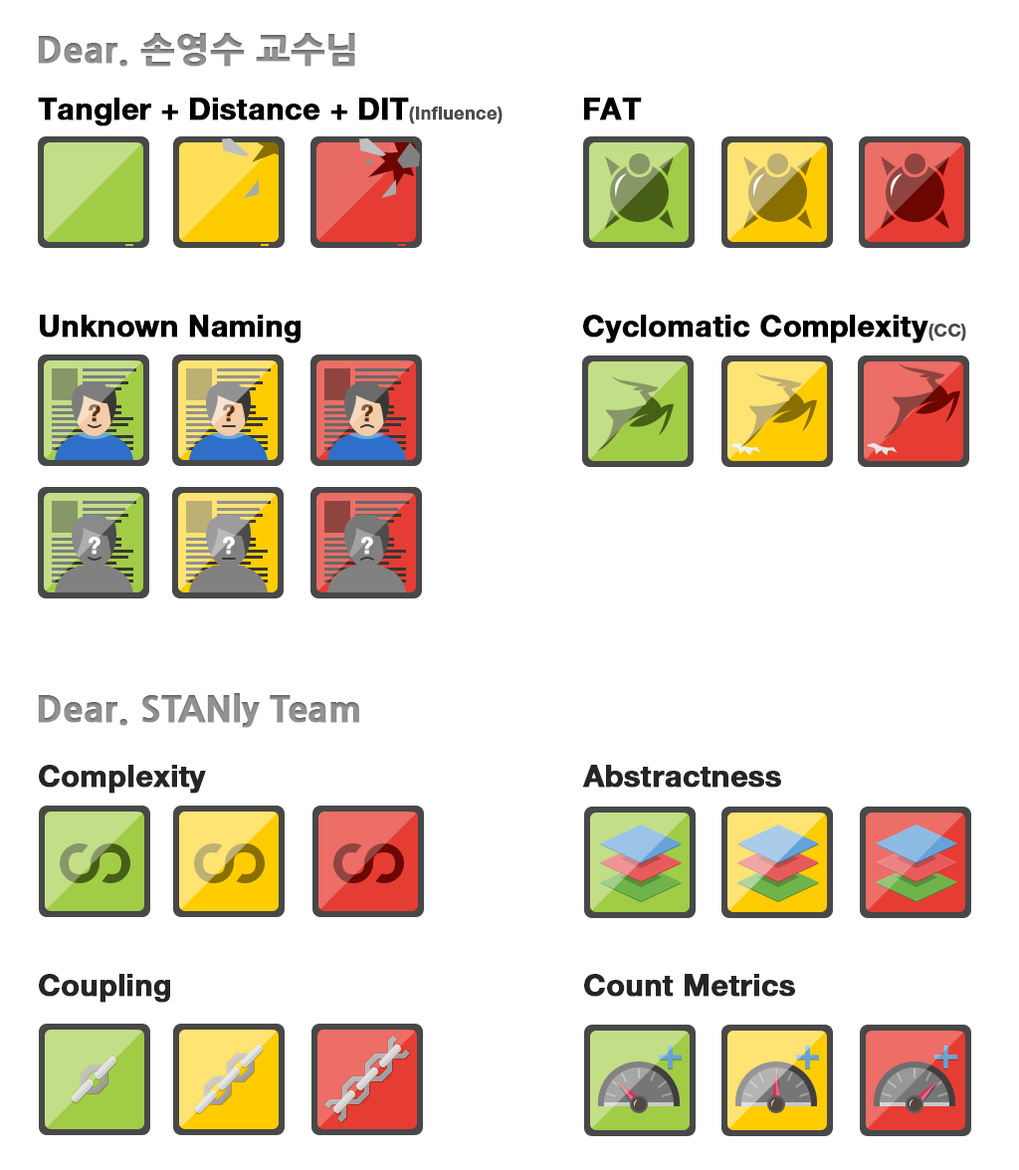
<style>
.page{position:relative;width:1019px;height:1170px;background:#ffffff}
.page>*{position:absolute;margin:0}
.t1{font:35.8px "NanumGothicExtraBold";color:#8d8d8d;font-weight:bold}
.t2{font:29.9px "HelveticaNeueLTPro-Bd";color:#000000;font-weight:bold}
.t3{font:17.9px "HelveticaNeueLTPro-Bd";color:#4b4b4b;font-weight:bold}
.t4{font:22.9px "HelveticaNeueLTPro-Bd";font-weight:bold}
.t5{font:22.9px "HelveticaNeueLTPro-Bd";color:#ffffff;font-weight:bold}
.t6{font:35.8px "NanumGothicExtraBold";color:#919191;font-weight:bold}
.t7{font:29.9px "HelveticaNeueLTPro-Bd";color:#252525;font-weight:bold}
</style>
<div class="page">
<p class="t1" style="left:38px;top:33px;width:317px;height:34px">Dear. 손영수 교수님</p>
<p class="t2" style="left:38px;top:98px;width:465px;height:28px">Tangler + Distance + DIT<span class="t3">(Influence)</span></p>
<p class="t2" style="left:584px;top:98px;width:58px;height:22px">FAT</p>
<p class="t2" style="left:40px;top:315px;width:261px;height:28px">Unknown Naming</p>
<p class="t2" style="left:583px;top:315px;width:384px;height:28px">Cyclomatic Complexity<span class="t3">(CC)</span></p>
<p class="t4" style="left:89px;top:404px;width:12px;height:18px">?</p>
<p class="t4" style="left:223px;top:404px;width:12px;height:18px">?</p>
<p class="t4" style="left:361px;top:404px;width:12px;height:18px">?</p>
<p class="t5" style="left:89px;top:537px;width:12px;height:18px">?</p>
<p class="t5" style="left:223px;top:537px;width:12px;height:18px">?</p>
<p class="t5" style="left:361px;top:537px;width:12px;height:18px">?</p>
<p class="t6" style="left:38px;top:693px;width:321px;height:35px">Dear. STANly Team</p>
<p class="t7" style="left:39px;top:765px;width:167px;height:28px">Complexity</p>
<p class="t7" style="left:582px;top:765px;width:199px;height:22px">Abstractness</p>
<p class="t7" style="left:39px;top:974px;width:131px;height:28px">Coupling</p>
<p class="t7" style="left:584px;top:974px;width:211px;height:23px">Count Metrics</p>
</div>
